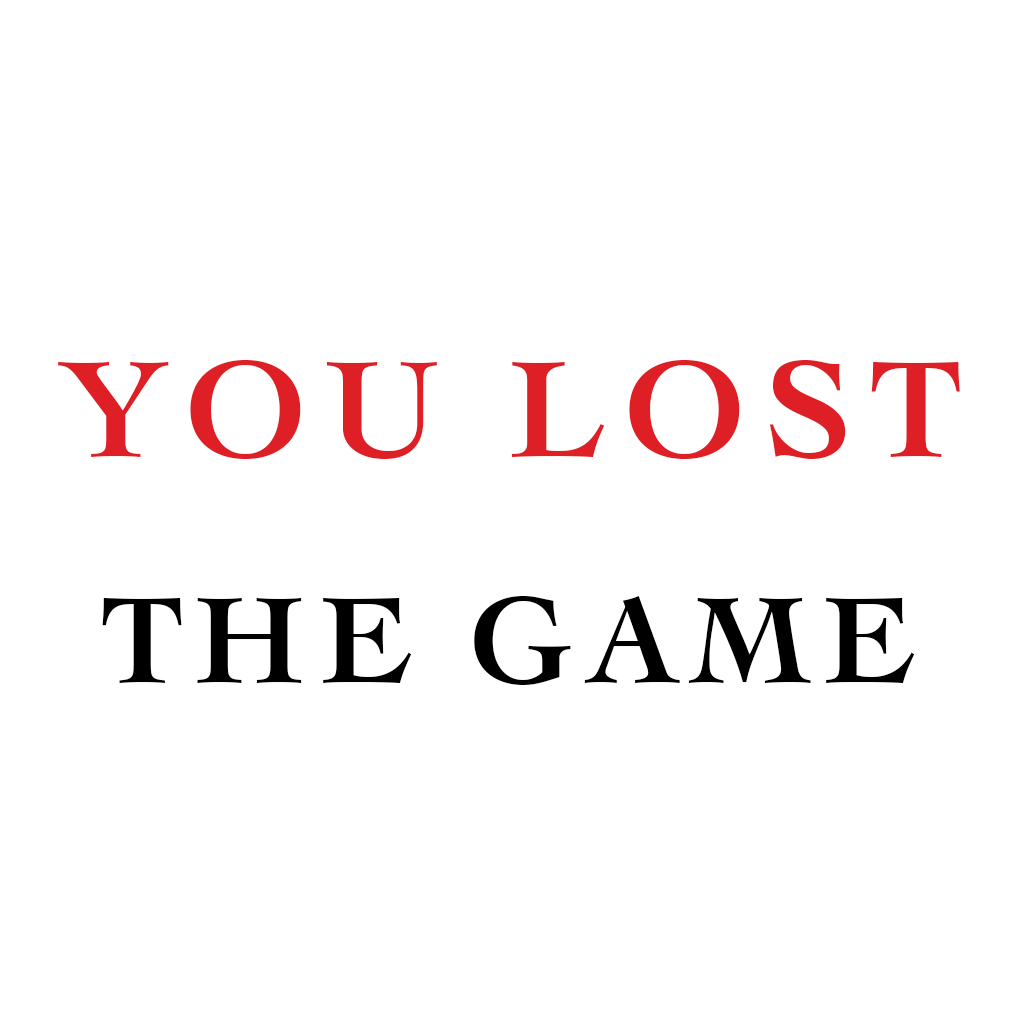
<style>
.page{position:relative;width:1024px;height:1024px;background:#ffffff}
.page>*{position:absolute;margin:0}
.t1{font:142.9px "Cochin-Bold";letter-spacing:0.11em;color:#de1f26;text-transform:uppercase}
.t2{font:128px "Cochin-Bold";letter-spacing:0.11em;color:#000000;text-transform:uppercase}
</style>
<div class="page">
<p class="t1" style="left:58px;top:360px;width:902px;height:99px">YOu LOst</p>
<p class="t2" style="left:102px;top:596px;width:813px;height:89px">THe Game</p>
</div>
